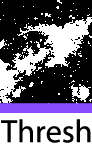
<style>
.page{position:relative;width:92px;height:150px;background:#000000}
.page>*{position:absolute;margin:0}
.t1{font:32.3px "MyriadPro-Regular";color:#000000}
</style>
<div class="page">
<p class="t1" style="left:1px;top:119px;width:90px;height:24px">Thresh</p>
</div>
